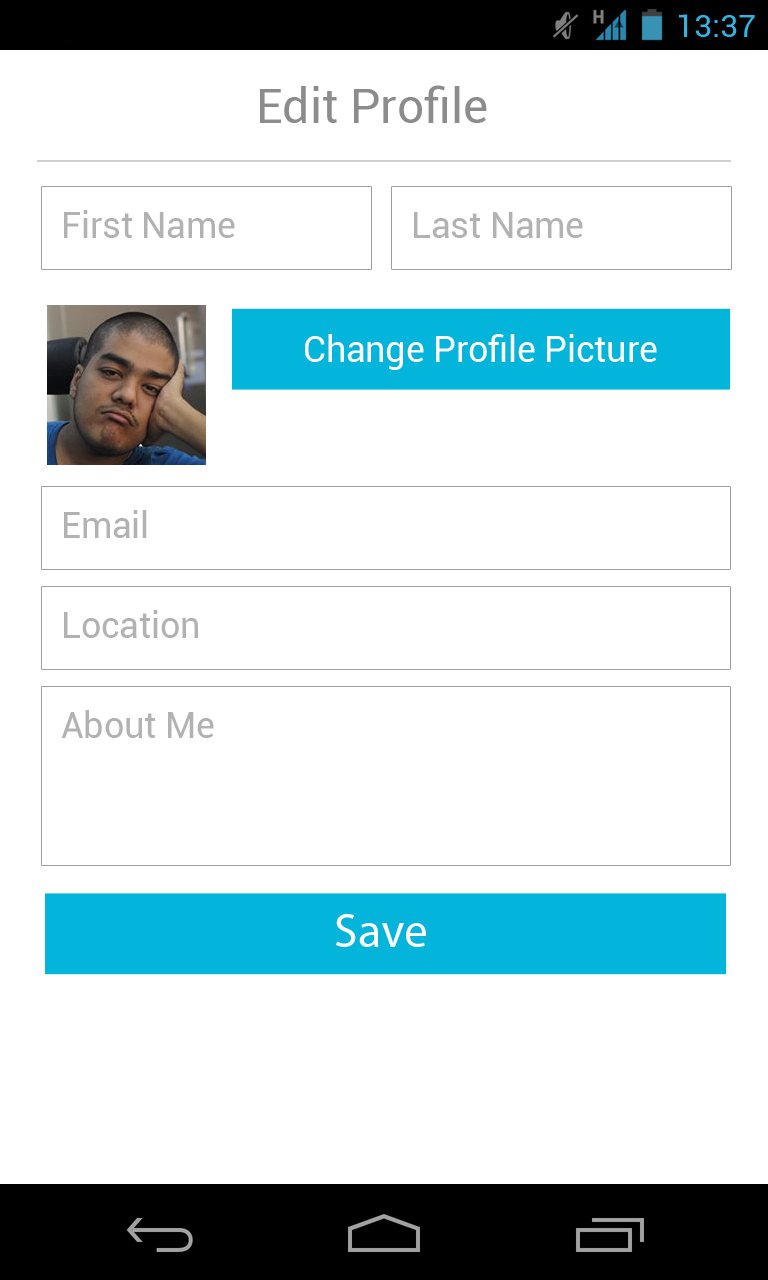
<style>
.page{position:relative;width:768px;height:1280px;background:#ffffff}
.page>*{position:absolute;margin:0}
.t1{font:48px "Roboto-Regular";color:#8c8c8c}
.t2{font:35.6px "Roboto-Regular";color:#b2b2b2}
.t3{font:35.6px "Roboto-Regular";color:#ffffff}
.t4{font:48px "MyriadPro-Regular";color:#ffffff}
</style>
<div class="page">
<p class="t1" style="left:260px;top:85px;width:227px;height:38px">Edit Profile</p>
<p class="t2" style="left:64px;top:210px;width:171px;height:28px">First Name</p>
<p class="t2" style="left:414px;top:212px;width:169px;height:26px">Last Name</p>
<p class="t3" style="left:305px;top:334px;width:352px;height:36px">Change Profile Picture</p>
<p class="t2" style="left:64px;top:510px;width:83px;height:28px">Email</p>
<p class="t2" style="left:64px;top:610px;width:134px;height:28px">Location</p>
<p class="t2" style="left:61px;top:710px;width:153px;height:28px">About Me</p>
<p class="t4" style="left:336px;top:914px;width:90px;height:33px">Save</p>
</div>
